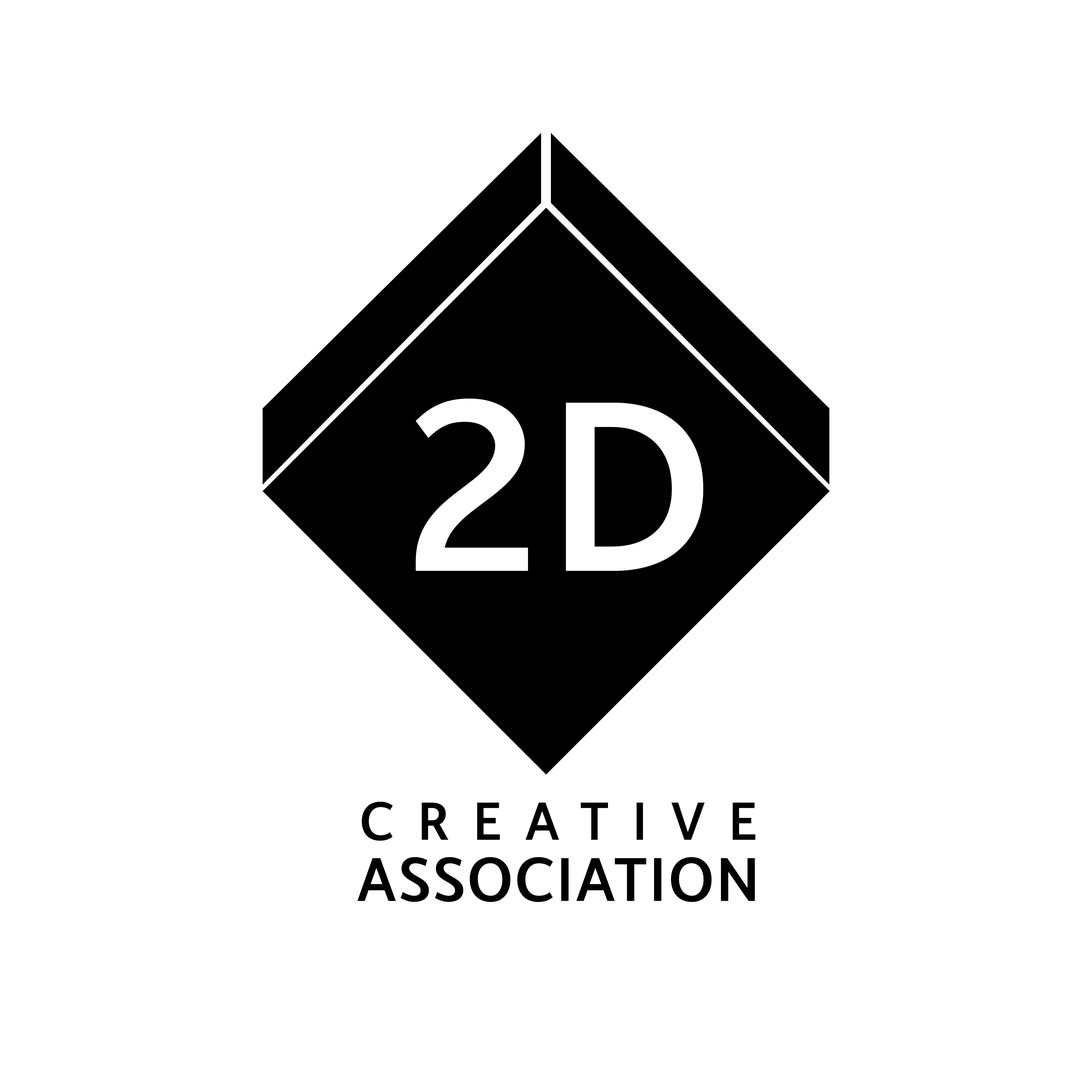
<style>
.page{position:relative;width:1092px;height:1092px;background:#ffffff}
.page>*{position:absolute;margin:0}
.t1{font:273px "CintaMedium";color:#ffffff}
.t2{font:60.3px "CintaMedium";letter-spacing:0.36em;color:#000000;text-transform:uppercase}
.t3{font:69.4px "CintaMedium";color:#000000;text-transform:uppercase}
</style>
<div class="page">
<p class="t1" style="left:416px;top:399px;width:287px;height:172px">2D</p>
<p class="t2" style="left:362px;top:802px;width:393px;height:39px">creative</p>
<p class="t3" style="left:357px;top:857px;width:398px;height:45px">association</p>
</div>
